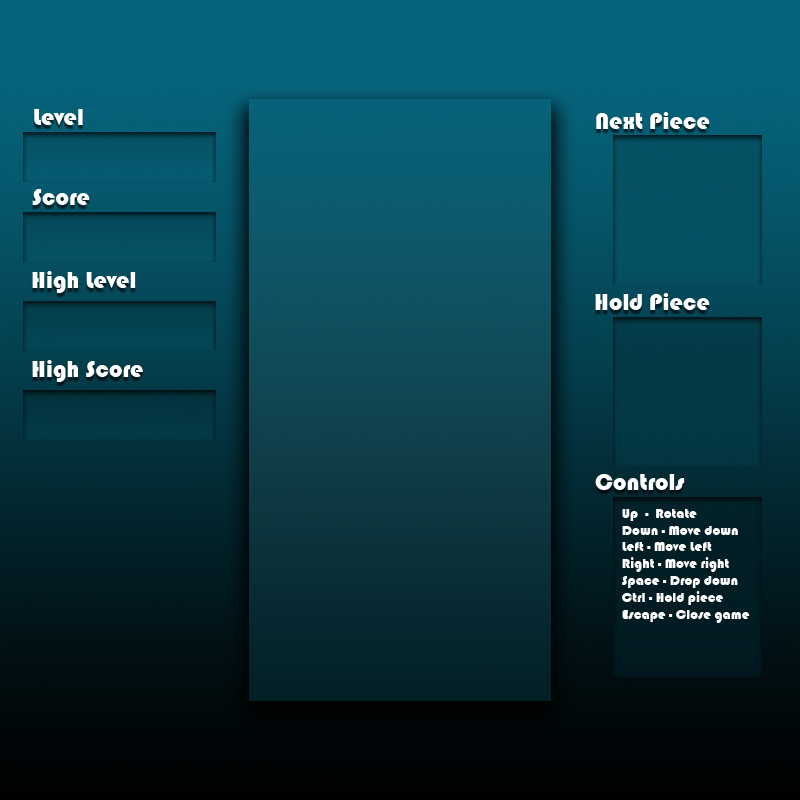
<style>
.page{position:relative;width:800px;height:800px}
.page>*{position:absolute;margin:0}
.t1{font:24px "Bauhaus93";color:#ffffff}
.t2{font:14px "Bauhaus93";color:#ffffff}
</style>
<div class="page">
<p class="t1" style="left:34px;top:109px;width:49px;height:17px">Level</p>
<p class="t1" style="left:596px;top:112px;width:114px;height:17px">Next Piece</p>
<p class="t1" style="left:32px;top:189px;width:58px;height:16px">Score</p>
<p class="t1" style="left:32px;top:271px;width:104px;height:22px">High Level</p>
<p class="t1" style="left:595px;top:293px;width:115px;height:17px">Hold Piece</p>
<p class="t1" style="left:32px;top:360px;width:111px;height:22px">High Score</p>
<p class="t1" style="left:595px;top:474px;width:90px;height:16px">Controls</p>
<p class="t2" style="left:622px;top:509px;width:128px;height:114px">Up  -  Rotate <br>Down - Move down <br>Left - Move Left <br>Right - Move right <br>Space - Drop down<br>Ctrl - Hold piece<br>Escape - Close game</p>
</div>
